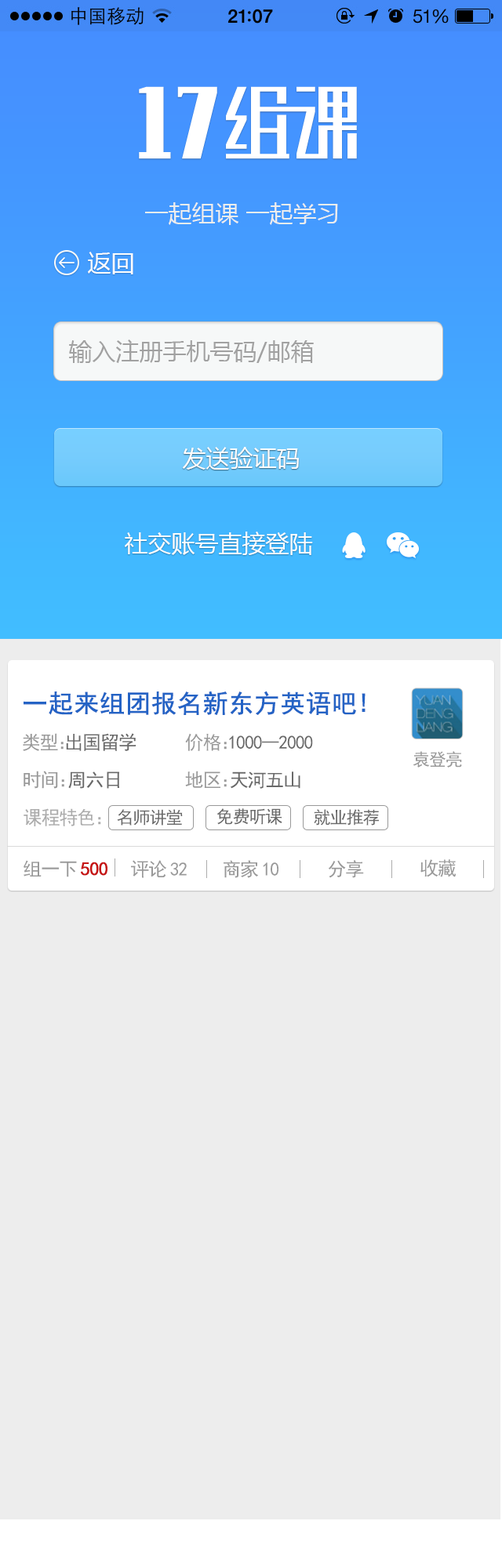
<style>
.page{position:relative;width:502px;height:1568px;background:#ededed}
.page>*{position:absolute;margin:0}
.t1{font:23.5px "MicrosoftYaHei";color:#ededed}
.t2{font:23.5px "MicrosoftYaHei";color:#fefefe}
.t3{font:23.5px "MicrosoftYaHei";color:#a1a1a1}
.t4{font:25.1px "SimHei";color:#2463c5;font-weight:bold}
.t5{font:18.8px "SimHei";letter-spacing:-0.05em;color:#696969}
.t6{font:18.8px "SimHei";letter-spacing:-0.05em;color:#999999}
.t7{font:18.8px "SimHei";letter-spacing:-0.62em;color:#999999}
.t8{font:17.2px "SimHei";letter-spacing:-0.05em;color:#999999}
.t9{font:18.8px "SimHei";letter-spacing:-0.5em;color:#999999}
.t10{font:18.8px "SimHei";letter-spacing:-0.52em;color:#999999}
.t11{font:18.8px "SimHei";letter-spacing:-0.05em;color:#acacac}
.t12{font:18.8px "SimHei";color:#acacac}
.t13{font:17.2px "SimHei";letter-spacing:-0.05em;color:#696969}
.t14{font:18.8px "SimHei";letter-spacing:-0.05em;color:#c61414;font-weight:bold}
.t15{font:18.8px "SimHei";letter-spacing:0.15em;color:#999999}
</style>
<div class="page">
<p class="t1" style="left:145px;top:202px;width:193px;height:23px">一起组课 一起学习</p>
<p class="t2" style="left:88px;top:252px;width:45px;height:22px">返回</p>
<p class="t3" style="left:69px;top:339px;width:245px;height:24px">输入注册手机号码/邮箱</p>
<p class="t2" style="left:182px;top:447px;width:117px;height:23px">发送验证码</p>
<p class="t2" style="left:125px;top:532px;width:188px;height:23px">社交账号直接登陆</p>
<p class="t4" style="left:24px;top:691px;width:341px;height:24px">一起来组团报名新东方英语吧!</p>
<p class="t5" style="left:23px;top:733px;width:113px;height:18px"><span class="t6">类型</span><span class="t7">：</span>出国留学</p>
<p class="t5" style="left:185px;top:733px;width:128px;height:18px"><span class="t6">价格</span><span class="t7">：</span>1000--2000</p>
<p class="t8" style="left:412px;top:751px;width:50px;height:17px">袁登亮</p>
<p class="t5" style="left:24px;top:771px;width:95px;height:18px"><span class="t6">时间</span><span class="t9">：</span>周六日</p>
<p class="t5" style="left:185px;top:771px;width:115px;height:18px"><span class="t6">地区</span><span class="t10">：</span>天河五山</p>
<p class="t11" style="left:24px;top:808px;width:77px;height:18px">课程特色<span class="t12">：</span></p>
<p class="t13" style="left:117px;top:809px;width:66px;height:17px">名师讲堂</p>
<p class="t13" style="left:216px;top:808px;width:66px;height:17px">免费听课</p>
<p class="t13" style="left:314px;top:809px;width:65px;height:17px">就业推荐</p>
<p class="t14" style="left:24px;top:860px;width:83px;height:17px"><span class="t6">组一</span><span class="t15">下</span>500</p>
<p class="t6" style="left:131px;top:860px;width:56px;height:18px">评<span class="t15">论</span>32</p>
<p class="t6" style="left:223px;top:860px;width:55px;height:18px">商<span class="t15">家</span>10</p>
<p class="t6" style="left:328px;top:860px;width:36px;height:18px">分享</p>
<p class="t6" style="left:420px;top:859px;width:36px;height:18px">收藏</p>
</div>
